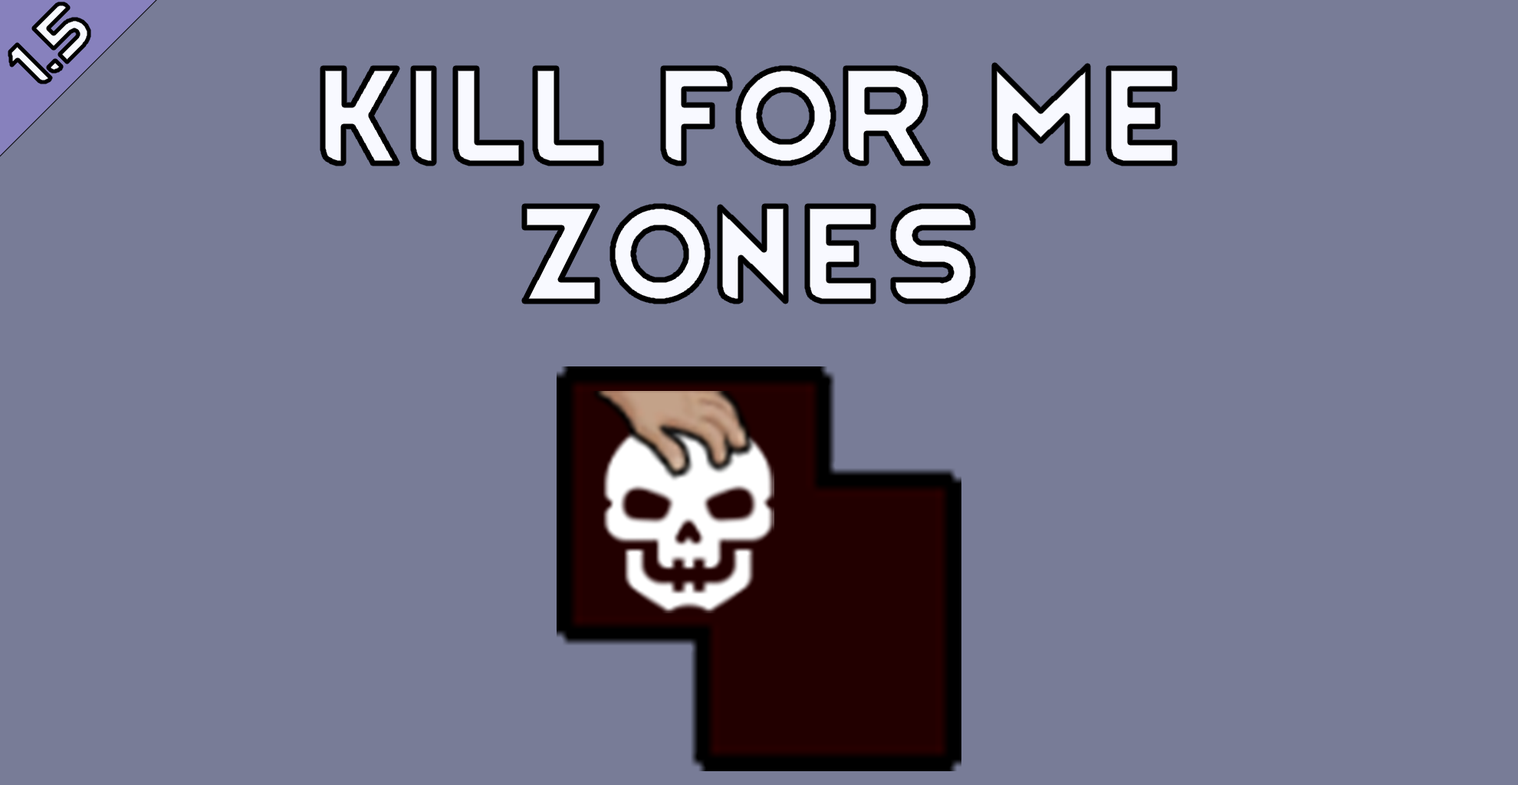
<style>
.page{position:relative;width:1518px;height:785px;background:#787c97}
.page>*{position:absolute;margin:0}
.t1{font:115px "RimWordFont";color:#f8f9ff}
</style>
<div class="page">
<p class="t1" style="left:323px;top:65px;width:852px;height:236px;text-align:center">Kill for me<br>zones</p>
</div>
